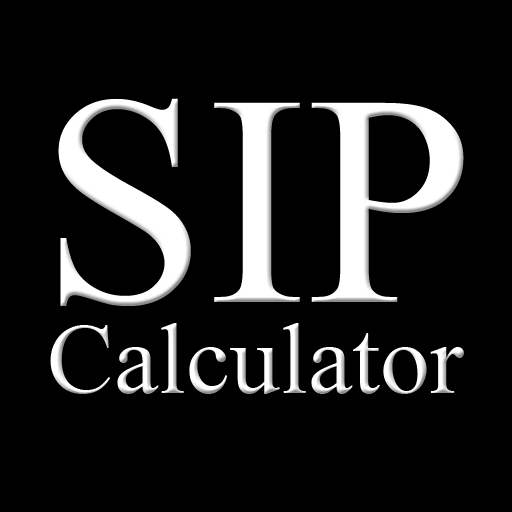
<style>
.page{position:relative;width:512px;height:512px;background:#000000}
.page>*{position:absolute;margin:0}
.t1{font:300px "TimesNewRomanPSMT";color:#ffffff}
.t2{font:100px "TimesNewRomanPSMT";color:#ffffff}
</style>
<div class="page">
<p class="t1" style="left:58px;top:98px;width:406px;height:208px">SIP</p>
<p class="t2" style="left:50px;top:323px;width:414px;height:71px">Calculator</p>
</div>
